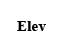
<style>
.page{position:relative;width:70px;height:35px;background:#ffffff}
.page>*{position:absolute;margin:0}
.t1{font:15.4px "TimesNewRomanPS-BoldMT";color:#000000}
</style>
<div class="page">
<p class="t1" style="left:17px;top:21px;width:29px;height:10px">Elev</p>
</div>
